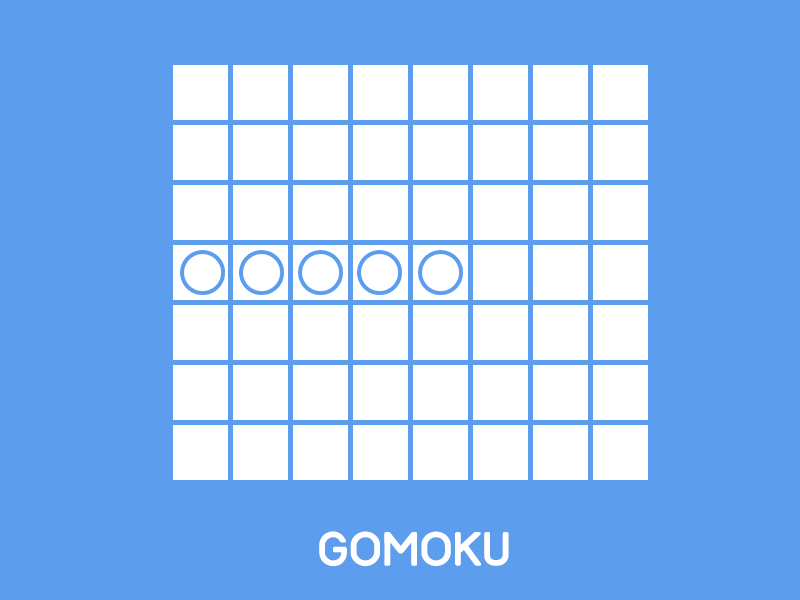
<style>
.page{position:relative;width:800px;height:600px;background:#5c9ded}
.page>*{position:absolute;margin:0}
.t1{font:41.7px "Track";color:#ffffff}
</style>
<div class="page">
<p class="t1" style="left:319px;top:531px;width:190px;height:35px">GOMOKU</p>
</div>
